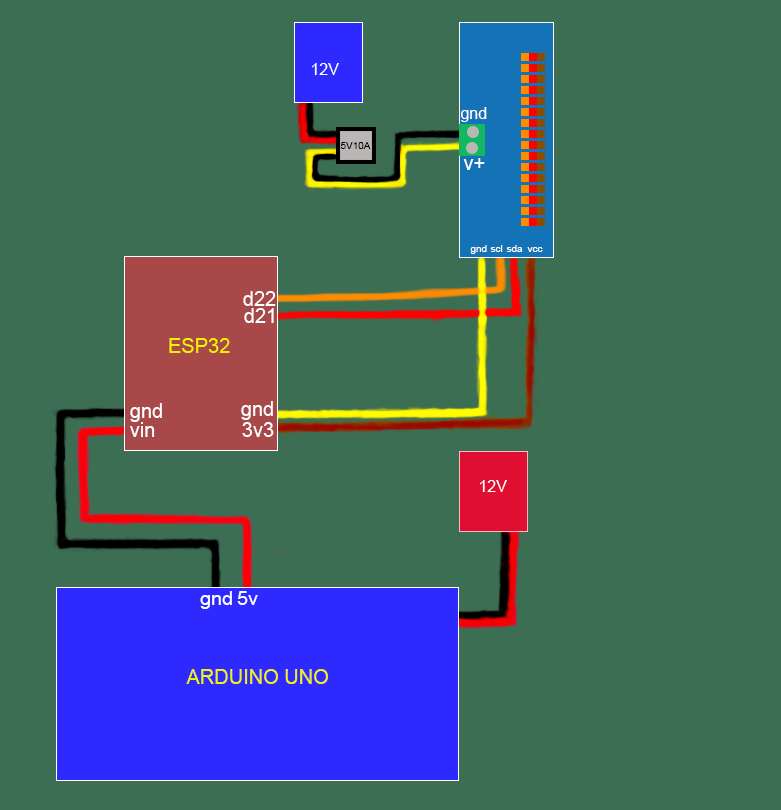
<style>
.page{position:relative;width:781px;height:810px;background:#3c6e53}
.page>*{position:absolute;margin:0}
.t1{font:16px "ArialMT";color:#ffffff}
.t2{font:10px "ArialMT";color:#000000}
.t3{font:20px "ArialMT";color:#ffffff}
.t4{font:10px "ArialMT";color:#ffffff}
.t5{font:19.4px "ArialMT";color:#ffffff}
.t6{font:20px "ArialMT";color:#f3f300}
</style>
<div class="page">
<p class="t1" style="left:312px;top:63px;width:27px;height:12px">12V</p>
<p class="t1" style="left:460px;top:107px;width:27px;height:15px">gnd</p>
<p class="t2" style="left:340px;top:142px;width:31px;height:7px">5V10A</p>
<p class="t3" style="left:463px;top:158px;width:22px;height:12px">v+</p>
<p class="t4" style="left:470px;top:245px;width:17px;height:9px">gnd</p>
<p class="t4" style="left:490px;top:245px;width:13px;height:7px">scl</p>
<p class="t4" style="left:506px;top:245px;width:17px;height:7px">sda</p>
<p class="t4" style="left:527px;top:247px;width:16px;height:5px">vcc</p>
<p class="t3" style="left:243px;top:291px;width:33px;height:15px">d22</p>
<p class="t3" style="left:244px;top:308px;width:30px;height:15px">d21</p>
<p class="t3" style="left:241px;top:401px;width:32px;height:19px">gnd</p>
<p class="t3" style="left:130px;top:403px;width:32px;height:19px">gnd</p>
<p class="t3" style="left:130px;top:422px;width:25px;height:15px">vin</p>
<p class="t3" style="left:242px;top:422px;width:32px;height:15px">3v3</p>
<p class="t1" style="left:480px;top:480px;width:27px;height:12px">12V</p>
<p class="t5" style="left:200px;top:591px;width:32px;height:18px">gnd</p>
<p class="t5" style="left:237px;top:591px;width:21px;height:14px">5v</p>
<p class="t6" style="left:186px;top:669px;width:142px;height:15px">ARDUINO UNO</p>
</div>
